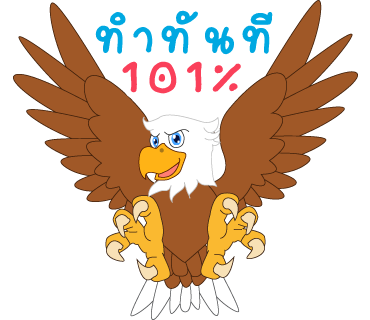
<style>
.page{position:relative;width:370px;height:320px;background:#ffffff}
.page>*{position:absolute;margin:0}
.t1{font:74px "2005_iannnnnMTV";letter-spacing:0.075em;color:#00a8e1;scale:1.06 1}
.t2{font:88px "2005_iannnnnMTV";letter-spacing:0.075em;color:#fa405a;scale:1.06 1}
</style>
<div class="page">
<p class="t1" style="left:95px;top:10px;width:178px;height:45px">ทำทันที</p>
<p class="t2" style="left:122px;top:61px;width:119px;height:33px">101%</p>
</div>
